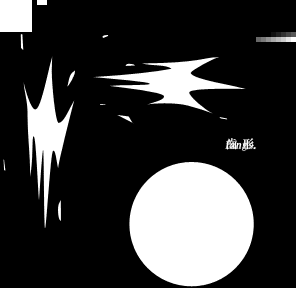
<style>
.page{position:relative;width:296px;height:288px;background:#000000}
.page>*{position:absolute;margin:0}
.t1{font:12px "HGMinchoB";color:#ffffff;font-style:italic}
</style>
<div class="page">
<p class="t1" style="left:225px;top:140px;width:31px;height:11px">fangs.</p>
</div>
